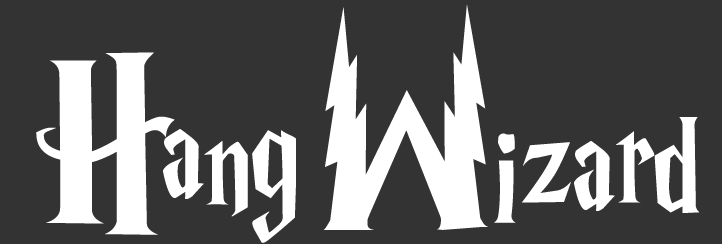
<style>
.page{position:relative;width:722px;height:244px;background:#333333}
.page>*{position:absolute;margin:0}
.t1{font:250px "HarryP";color:#ffffff}
.t2{font:155.6px "HarryP";color:#ffffff}
</style>
<div class="page">
<p class="t1" style="left:323px;top:5px;width:165px;height:225px;rotate:180deg"><span class="t2"> </span>M</p>
<p class="t2" style="left:36px;top:52px;width:260px;height:191px"><span class="t1">H</span>ang</p>
<p class="t2" style="left:494px;top:117px;width:206px;height:106px">izard</p>
</div>
